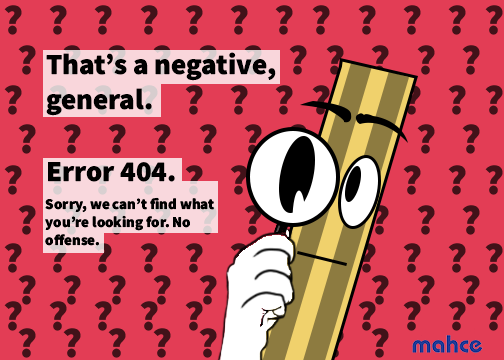
<style>
.page{position:relative;width:504px;height:360px;background:#e33d55}
.page>*{position:absolute;margin:0}
.t1{font:29px "SourceSansRoman-Black";color:#000000}
.t2{font:15px "SourceSansRoman-Black";color:#000000}
</style>
<div class="page">
<p class="t1" style="left:46px;top:52px;width:230px;height:64px">That’s a negative, general.</p>
<p class="t2" style="left:45px;top:162px;width:169px;height:84px"><span class="t1">Error 404.<br><br></span>Sorry, we can’t find what you’re looking for. No offense.</p>
</div>
